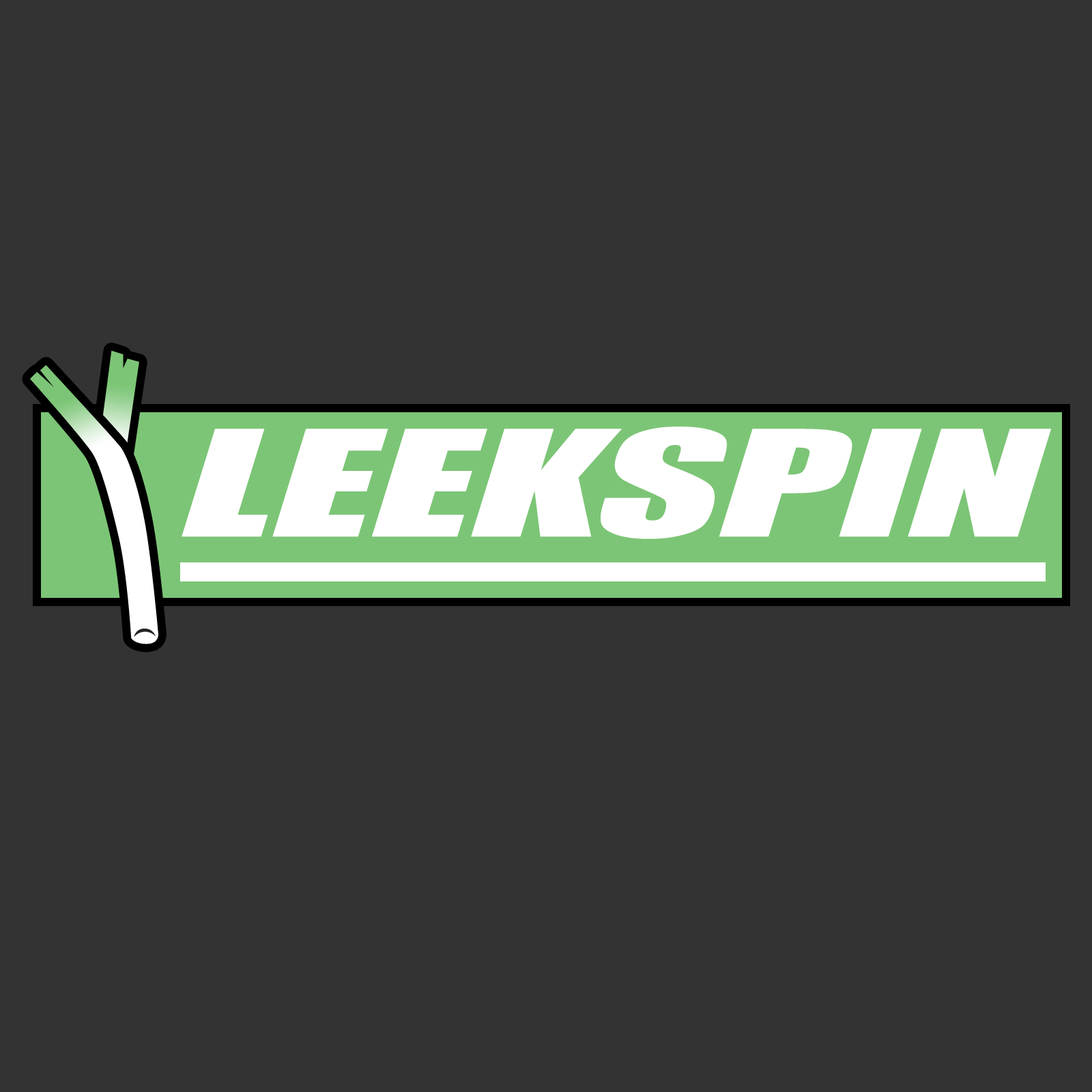
<style>
.page{position:relative;width:1092px;height:1092px;background:#333333}
.page>*{position:absolute;margin:0}
.t1{font:136.1px "Impact";color:#ffffff;font-style:italic;scale:1.75 1}
</style>
<div class="page">
<p class="t1" style="left:182px;top:427px;width:869px;height:112px">LEEKSPIN</p>
</div>
